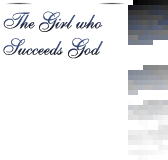
<style>
.page{position:relative;width:168px;height:160px;background:#ffffff}
.page>*{position:absolute;margin:0}
.t1{font:22px "Caligraf-W";scale:0.95 1}
</style>
<div class="page">
<p class="t1" style="left:3px;top:11px;width:100px;height:21px">The Girl who</p>
<p class="t1" style="left:3px;top:11px;width:100px;height:21px">The Girl who</p>
<p class="t1" style="left:3px;top:38px;width:100px;height:21px">Succeeds God</p>
<p class="t1" style="left:3px;top:38px;width:100px;height:21px">Succeeds God</p>
</div>
